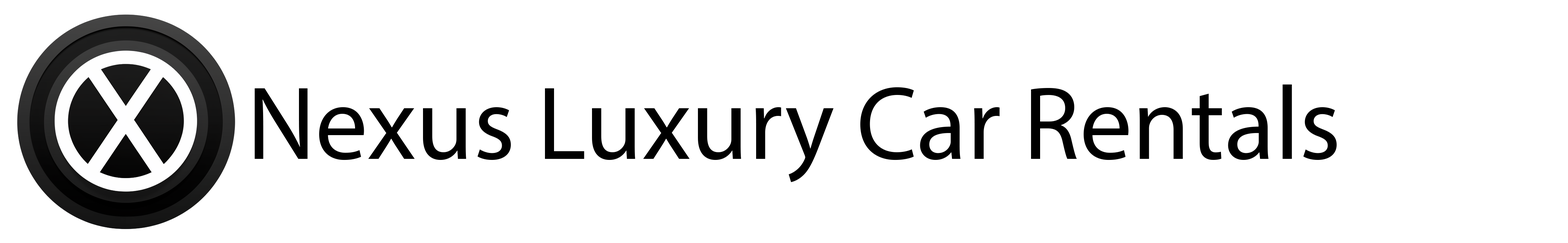
<style>
.page{position:relative;width:1568px;height:243px;background:#ffffff}
.page>*{position:absolute;margin:0}
.t1{font:104.5px "MyriadPro-Regular";color:#000000}
</style>
<div class="page">
<p class="t1" style="left:255px;top:84px;width:1082px;height:98px">Nexus Luxury Car Rentals</p>
</div>
